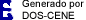
<style>
.page{position:relative;width:86px;height:20px;background:#ffffff}
.page>*{position:absolute;margin:0}
.t1{font:10px "ArialMT";color:#000000}
</style>
<div class="page">
<p class="t1" style="left:22px;top:0px;width:62px;height:19px">Generado por<br>DOS-CENE</p>
</div>
